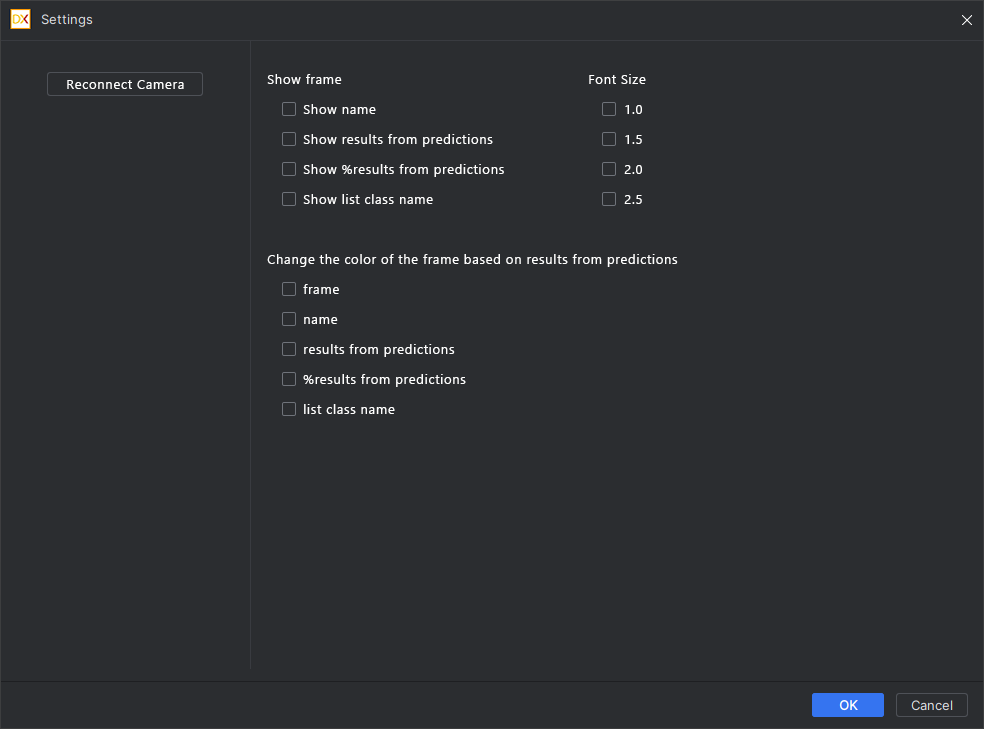
<style>
.page{position:relative;width:984px;height:729px;background:#2b2d30}
.page>*{position:absolute;margin:0}
.t1{font:13.3px/30px "LeelawadeeUI";letter-spacing:0.04em;color:#ffffff}
.t2{font:13.3px "LeelawadeeUI";letter-spacing:0.04em;color:#ffffff}
</style>
<div class="page">
<p class="t1" style="left:267px;top:74px;width:411px;height:340px">Show frame<br> Show name<br> Show results from predictions<br> Show %results from predictions<br> Show list class name<br><br>Change the color of the frame based on results from predictions<br> frame <br> name<br> results from predictions<br> %results from predictions<br> list class name</p>
<p class="t1" style="left:589px;top:74px;width:57px;height:130px">Font Size<br> 1.0<br> 1.5<br> 2.0<br> 2.5</p>
<p class="t2" style="left:67px;top:80px;width:117px;height:9px">Reconnect Camera</p>
</div>
